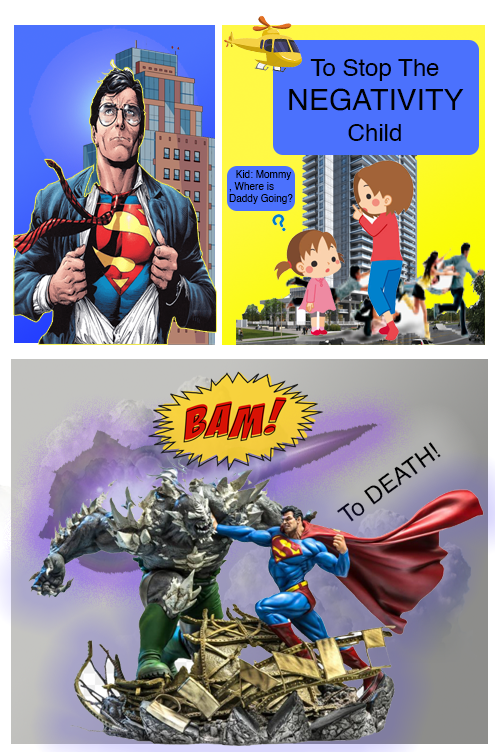
<style>
.page{position:relative;width:495px;height:752px}
.page>*{position:absolute;margin:0}
.t1{font:24px "Helvetica";color:#000000}
.t2{font:30px "Helvetica";color:#000000}
.t3{font:10px "Helvetica";color:#000000}
</style>
<div class="page">
<p class="t1" style="left:289px;top:59px;width:175px;height:82px;text-align:center">To Stop The <br><span class="t2">NEGATIVITY <br></span>Child</p>
<p class="t3" style="left:229px;top:170px;width:64px;height:34px">Kid: Mommy , Where is Daddy Going?</p>
<p class="t1" style="left:337px;top:442px;width:104px;height:80px;rotate:-36deg">To DEATH!</p>
</div>
